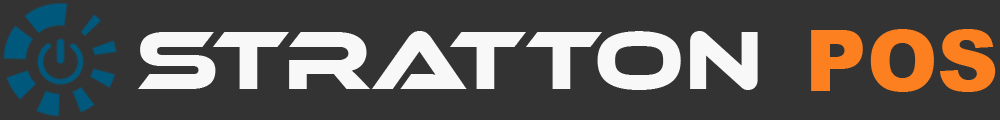
<style>
.page{position:relative;width:1000px;height:120px;background:#333333}
.page>*{position:absolute;margin:0}
.t1{font:85px "Arial-Black";color:#fc8020}
.t2{font:85px "EthnocentricRg-Regular";color:#f8f8f8}
</style>
<div class="page">
<p class="t1" style="left:811px;top:29px;width:185px;height:63px">POS</p>
<p class="t2" style="left:138px;top:31px;width:620px;height:59px">STRAtton</p>
</div>
